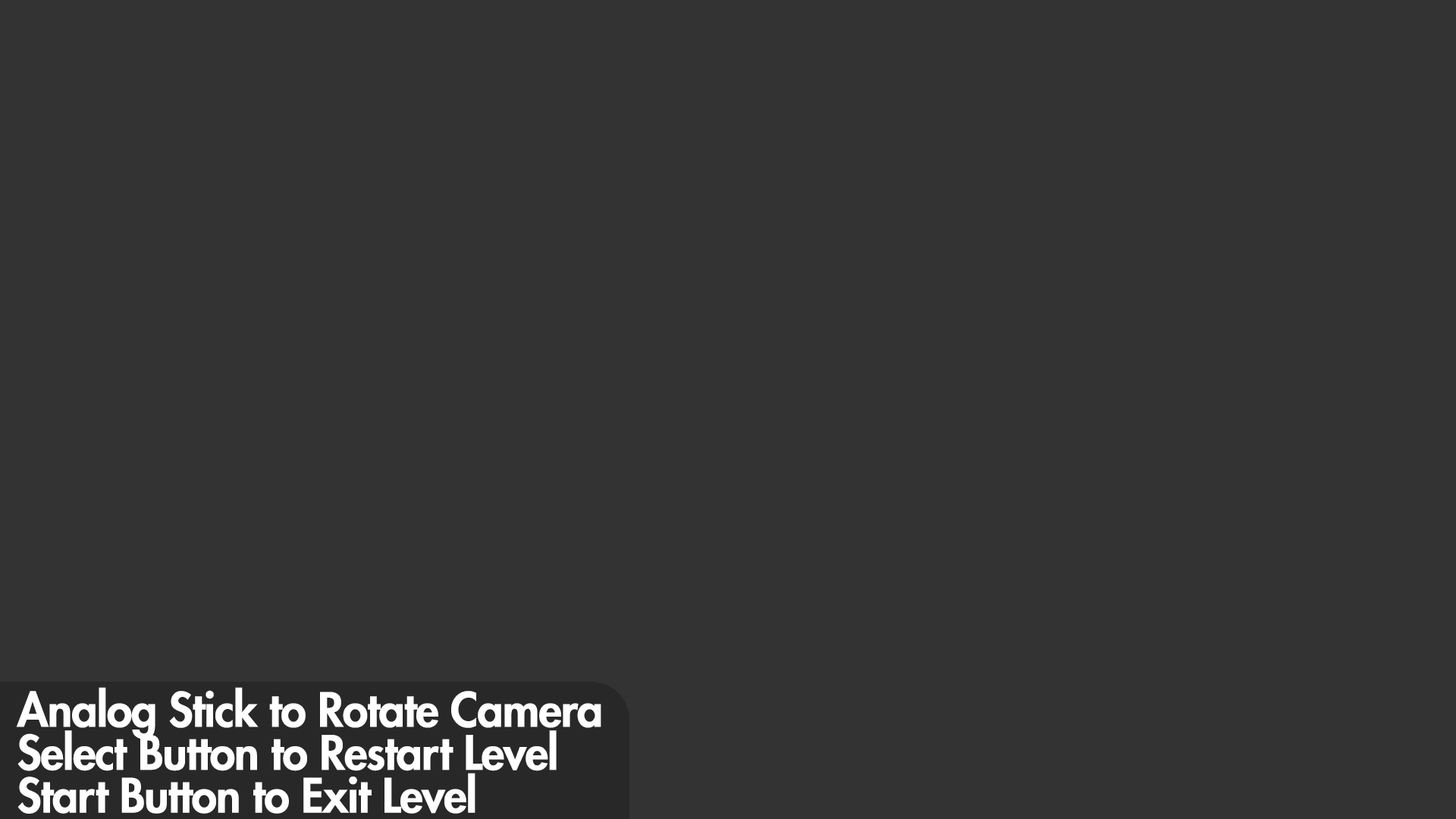
<style>
.page{position:relative;width:1456px;height:819px;background:#333333}
.page>*{position:absolute;margin:0}
.t1{font:46.3px "FuturaLT-Heavy";letter-spacing:-0.02em;color:#ffffff}
</style>
<div class="page">
<p class="t1" style="left:16px;top:687px;width:585px;height:127px">Analog Stick to Rotate Camera<br>Select Button to Restart Level<br>Start Button to Exit Level</p>
</div>
